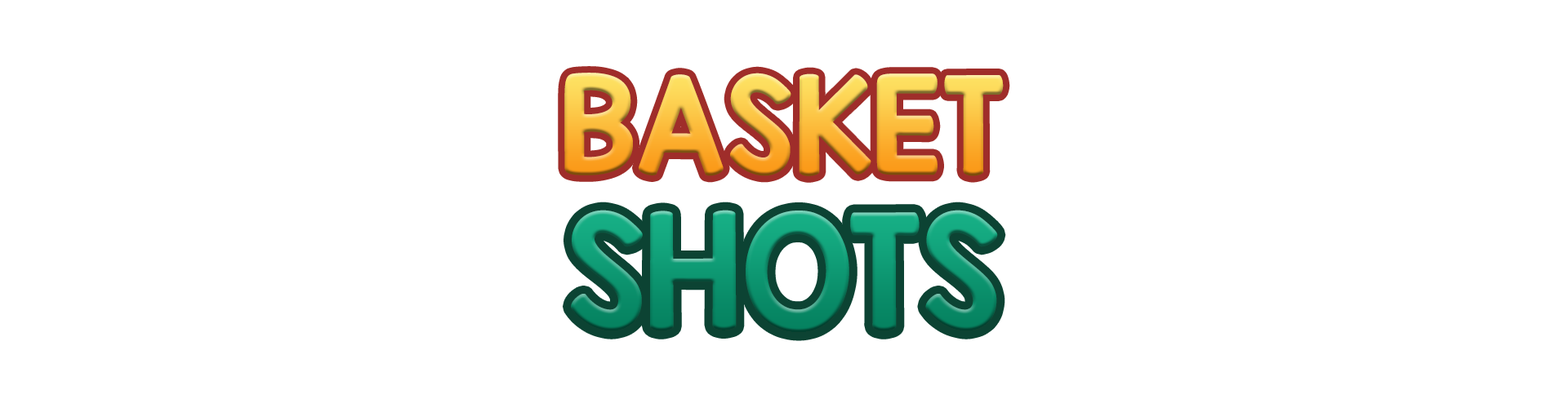
<style>
.page{position:relative;width:1568px;height:408px;background:#ffffff}
.page>*{position:absolute;margin:0}
.t1{font:114.3px "KGRedHands"}
.t2{font:134.8px "KGRedHands"}
</style>
<div class="page">
<p class="t1" style="left:564px;top:73px;width:440px;height:103px">BASKET</p>
<p class="t2" style="left:571px;top:210px;width:427px;height:123px">SHOTS</p>
</div>
